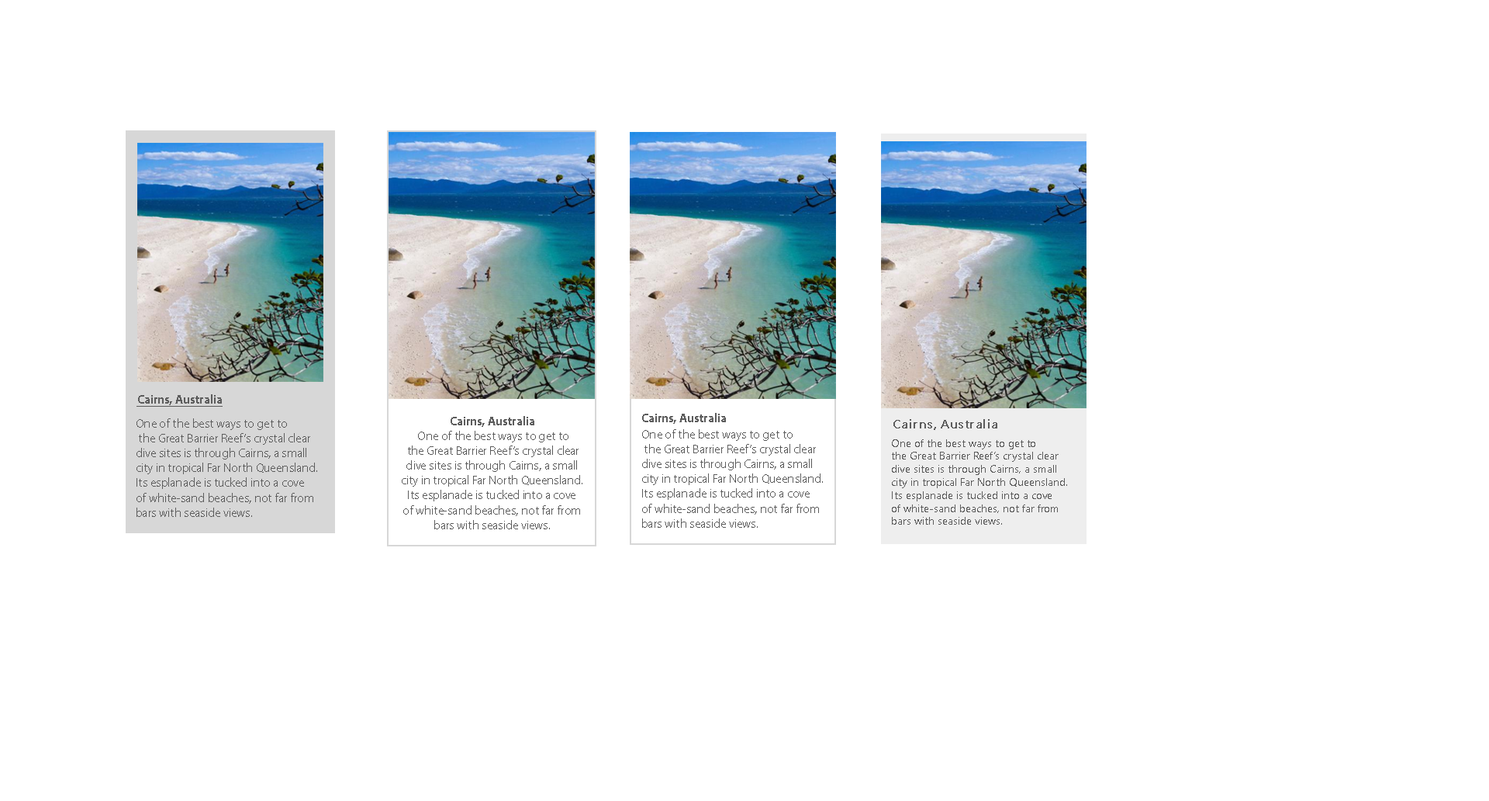
<style>
.page{position:relative;width:1489px;height:801px;background:#ffffff}
.page>*{position:absolute;margin:0}
.t1{font:12.4px "MyriadPro-Bold";color:#5c5c5c;text-decoration:underline}
.t2{font:12.4px "MyriadPro-Bold";color:#5c5c5c}
.t3{font:12.4px "MyriadPro-Regular";color:#5c5c5c}
.t4{font:12.4px "SegoeUISymbol";letter-spacing:0.03em;color:#5c5c5c;font-weight:bold}
.t5{font:10.9px "SegoeUI";color:#5c5c5c}
</style>
<div class="page">
<p class="t1" style="left:137px;top:394px;width:86px;height:12px">Cairns, Australia</p>
<p class="t2" style="left:642px;top:413px;width:84px;height:11px">Cairns, Australia</p>
<p class="t3" style="left:137px;top:418px;width:180px;height:99px">One of the best ways to get to<br> the Great Barrier Reef’s crystal clear <br>dive sites is through Cairns, a small <br>city in tropical Far North Queensland. <br>Its esplanade is tucked into a cove <br>of white-sand beaches, not far from <br>bars with seaside views.</p>
<p class="t2" style="left:451px;top:416px;width:83px;height:11px">Cairns, Australia</p>
<p class="t4" style="left:894px;top:419px;width:104px;height:11px">Cairns, Australia</p>
<p class="t3" style="left:402px;top:431px;width:181px;height:98px;text-align:center">One of the best ways to get to<br> the Great Barrier Reef’s crystal clear <br>dive sites is through Cairns, a small <br>city in tropical Far North Queensland. <br>Its esplanade is tucked into a cove <br>of white-sand beaches, not far from <br>bars with seaside views.</p>
<p class="t3" style="left:642px;top:429px;width:181px;height:99px">One of the best ways to get to<br> the Great Barrier Reef’s crystal clear <br>dive sites is through Cairns, a small <br>city in tropical Far North Queensland. <br>Its esplanade is tucked into a cove <br>of white-sand beaches, not far from <br>bars with seaside views.</p>
<p class="t5" style="left:892px;top:439px;width:175px;height:85px">One of the best ways to get to<br>the Great Barrier Reef’s crystal clear <br>dive sites is through Cairns, a small <br>city in tropical Far North Queensland. <br>Its esplanade is tucked into a cove <br>of white-sand beaches, not far from <br>bars with seaside views.</p>
</div>
